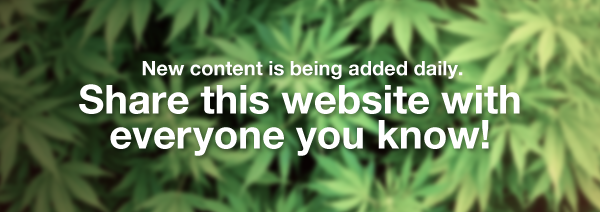
<style>
.page{position:relative;width:600px;height:212px}
.page>*{position:absolute;margin:0}
.t1{font:20px "HelveticaNeue-Bold";color:#ffffff}
.t2{font:40px/35px "HelveticaNeue-Bold";color:#ffffff}
</style>
<div class="page">
<p class="t1" style="left:142px;top:61px;width:321px;height:19px">New content is being added daily.</p>
<p class="t2" style="left:79px;top:84px;width:441px;height:72px;text-align:center">Share this website with everyone you know!</p>
</div>
